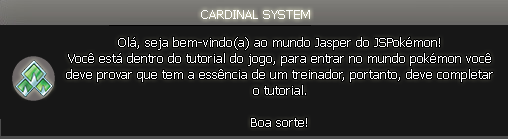
<style>
.page{position:relative;width:508px;height:139px;background:#171717}
.page>*{position:absolute;margin:0}
.t1{font:13.3px "Tahoma";color:#ffffff}
</style>
<div class="page">
<p class="t1" style="left:201px;top:10px;width:109px;height:9px">CARDINAL SYSTEM</p>
<p class="t1" style="left:66px;top:37px;width:427px;height:90px;text-align:center">Olá, seja bem-vindo(a) ao mundo Jasper do JSPokémon!<br>Você está dentro do tutorial do jogo, para entrar no mundo pokémon você deve provar que tem a essência de um treinador, portanto, deve completar o tutorial.<br><br>Boa sorte!</p>
</div>
